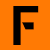
<style>
.page{position:relative;width:50px;height:50px;background:#ff7a04}
.page>*{position:absolute;margin:0}
.t1{font:55.4px "Quantify";color:#000000;scale:0.95 1}
</style>
<div class="page">
<p class="t1" style="left:13px;top:6px;width:26px;height:39px">F</p>
</div>
